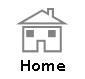
<style>
.page{position:relative;width:85px;height:79px;background:#ffffff}
.page>*{position:absolute;margin:0}
.t1{font:17.7px "Calibri-Bold";color:#050505}
</style>
<div class="page">
<p class="t1" style="left:21px;top:60px;width:44px;height:11px">Home</p>
</div>
